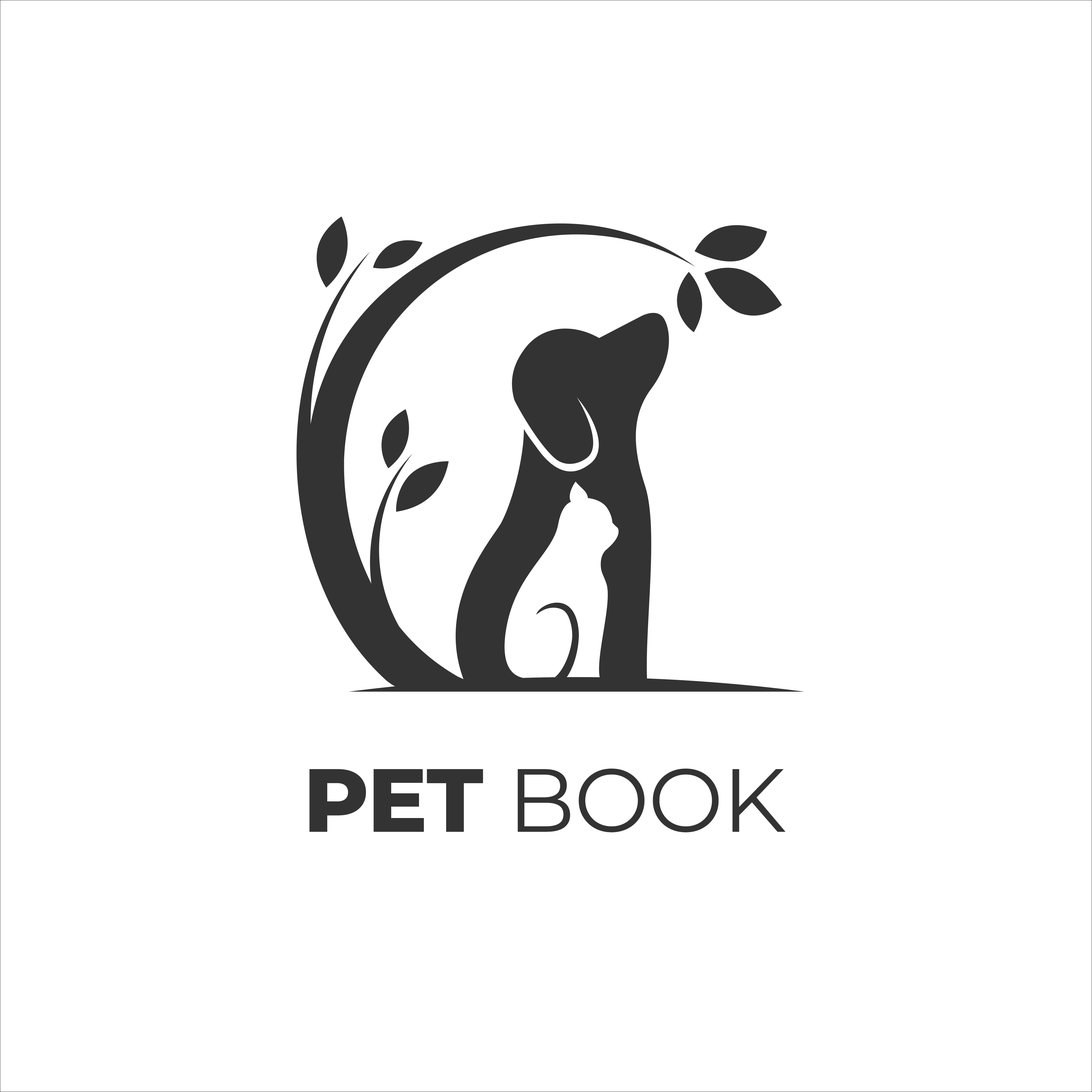
<style>
.page{position:relative;width:1092px;height:1092px;background:#ffffff}
.page>*{position:absolute;margin:0}
.t1{font:89.4px "Montserrat-Regular";letter-spacing:-0.01em;color:#333333}
.t2{font:89.4px "Montserrat-ExtraBold";letter-spacing:-0.01em;color:#333333}
</style>
<div class="page">
<p class="t1" style="left:309px;top:768px;width:477px;height:64px"><span class="t2">PET </span>BOOK</p>
</div>
